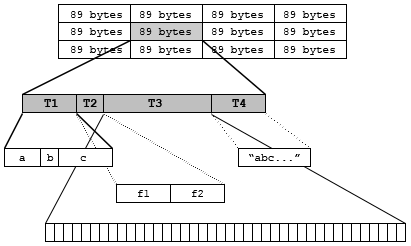
<style>
.page{position:relative;width:411px;height:246px;background:#ffffff}
.page>*{position:absolute;margin:0}
.t1{font:11px "CourierNewPSMT";color:#000000}
.t2{font:12px "CourierNewPS-BoldMT";color:#000000}
</style>
<div class="page">
<p class="t1" style="left:71px;top:11px;width:51px;height:9px">89 bytes</p>
<p class="t1" style="left:140px;top:11px;width:51px;height:9px">89 bytes</p>
<p class="t1" style="left:212px;top:11px;width:51px;height:9px">89 bytes</p>
<p class="t1" style="left:284px;top:11px;width:51px;height:9px">89 bytes</p>
<p class="t1" style="left:71px;top:28px;width:51px;height:9px">89 bytes</p>
<p class="t1" style="left:140px;top:28px;width:51px;height:9px">89 bytes</p>
<p class="t1" style="left:212px;top:28px;width:51px;height:9px">89 bytes</p>
<p class="t1" style="left:284px;top:28px;width:51px;height:9px">89 bytes</p>
<p class="t1" style="left:71px;top:46px;width:51px;height:9px">89 bytes</p>
<p class="t1" style="left:140px;top:46px;width:51px;height:9px">89 bytes</p>
<p class="t1" style="left:212px;top:46px;width:51px;height:9px">89 bytes</p>
<p class="t1" style="left:284px;top:46px;width:51px;height:9px">89 bytes</p>
<p class="t2" style="left:44px;top:99px;width:14px;height:8px">T1</p>
<p class="t2" style="left:83px;top:99px;width:14px;height:8px">T2</p>
<p class="t2" style="left:148px;top:99px;width:14px;height:8px">T3</p>
<p class="t2" style="left:232px;top:99px;width:14px;height:8px">T4</p>
<p class="t1" style="left:19px;top:156px;width:6px;height:5px">a</p>
<p class="t1" style="left:47px;top:154px;width:7px;height:7px">b</p>
<p class="t1" style="left:80px;top:156px;width:6px;height:5px">c</p>
<p class="t1" style="left:249px;top:154px;width:51px;height:7px">“abc...”</p>
<p class="t1" style="left:138px;top:190px;width:11px;height:7px">f1</p>
<p class="t1" style="left:192px;top:190px;width:11px;height:7px">f2</p>
</div>
